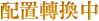
<style>
.page{position:relative;width:99px;height:21px;background:#ffffff}
.page>*{position:absolute;margin:0}
.t1{font:20px "RyuminPr6N-ExBold"}
</style>
<div class="page">
<p class="t1" style="left:0px;top:1px;width:99px;height:19px">配置轉換中</p>
</div>
